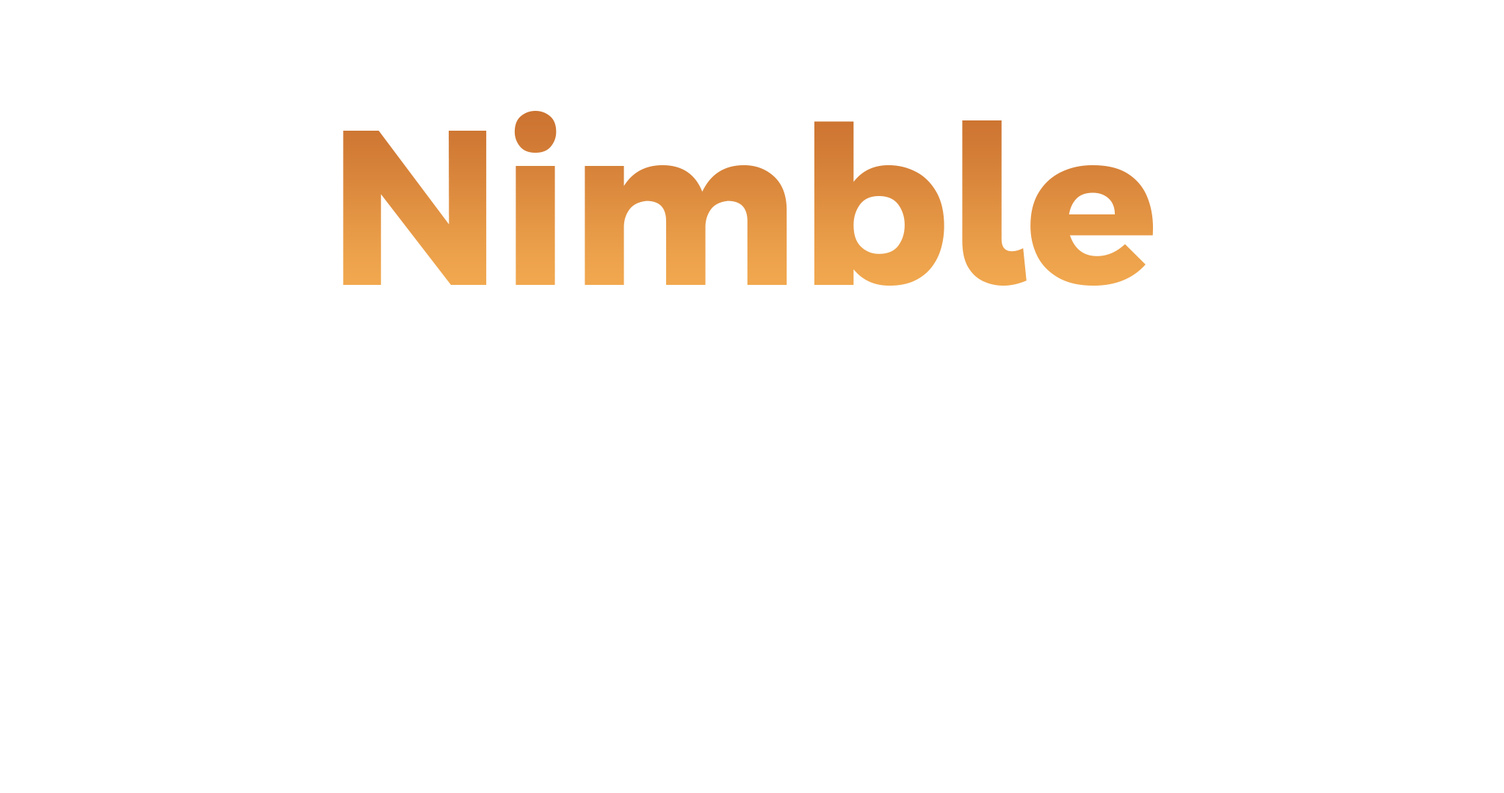
<style>
.page{position:relative;width:1504px;height:793px;background:#ffffff}
.page>*{position:absolute;margin:0}
.t1{font:220.1px "ArgentumSans-Bold";color:#e39443}
</style>
<div class="page">
<p class="t1" style="left:343px;top:111px;width:810px;height:175px">Nimble</p>
</div>
